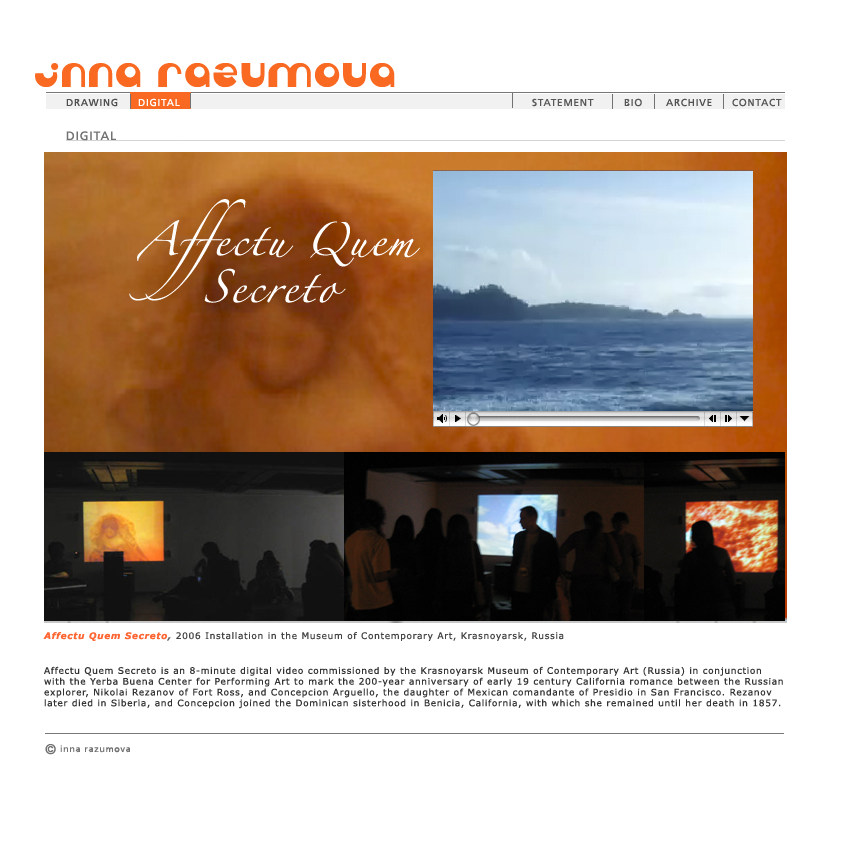
<style>
.page{position:relative;width:860px;height:864px;background:#ffffff}
.page>*{position:absolute;margin:0}
.t1{font:24px "Tabun";letter-spacing:0.075em;color:#f96922}
.t2{font:10px "Frutiger-Roman";letter-spacing:0.075em;color:#4f4f4f}
.t3{font:10px "Frutiger-Roman";letter-spacing:0.075em;color:#ffffff}
.t4{font:10px "Frutiger-Roman";letter-spacing:0.075em;color:#585858}
.t5{font:10px "Frutiger-Roman";letter-spacing:0.075em;color:#555555}
.t6{font:10px "Frutiger-Roman";letter-spacing:0.075em;color:#515151}
.t7{font:10px "Frutiger-Roman";letter-spacing:0.075em;color:#575757}
.t8{font:12px "Frutiger-Roman";letter-spacing:0.075em;color:#727272}
.t9{font:30px "Zapfino";letter-spacing:0.075em;color:#ffffff}
.t10{font:9px "Verdana";letter-spacing:0.075em;color:#444444}
.t11{font:9px "Verdana-BoldItalic";letter-spacing:0.075em;color:#ff6633}
.t12{font:9px "Verdana-BoldItalic";letter-spacing:0.075em;color:#666666}
.t13{font:9px "Verdana";letter-spacing:0.075em;color:#333333}
.t14{font:14px "Frutiger-Roman";letter-spacing:0.075em;color:#727272}
.t15{font:9px "Frutiger-Roman";letter-spacing:0.075em;color:#727272}
</style>
<div class="page">
<p class="t1" style="left:35px;top:63px;width:360px;height:25px">inna razumova</p>
<p class="t2" style="left:66px;top:98px;width:52px;height:9px">DRAWING</p>
<p class="t3" style="left:138px;top:98px;width:42px;height:9px">DIGITAL</p>
<p class="t4" style="left:532px;top:98px;width:62px;height:9px">STATEMENT</p>
<p class="t5" style="left:624px;top:98px;width:18px;height:9px">BIO</p>
<p class="t6" style="left:666px;top:98px;width:46px;height:9px">ARCHIVE</p>
<p class="t7" style="left:732px;top:98px;width:50px;height:9px">CONTACT</p>
<p class="t8" style="left:66px;top:131px;width:50px;height:10px">DIGITAL</p>
<p class="t9" style="left:129px;top:199px;width:291px;height:102px">Affectu Quem</p>
<p class="t9" style="left:204px;top:268px;width:142px;height:35px">Secreto</p>
<p class="t10" style="left:43px;top:632px;width:521px;height:9px"><span class="t11">Affectu Quem Secreto</span><span class="t12">,</span> 2006 Installation in the Museum of Contemporary Art, Krasnoyarsk, Russia</p>
<p class="t13" style="left:44px;top:666px;width:739px;height:43px">Affectu Quem Secreto is an 8-minute digital video commissioned by the Krasnoyarsk Museum of Contemporary Art (Russia) in conjunction with the Yerba Buena Center for Performing Art to mark the 200-year anniversary of early 19 century California romance between the Russian explorer, Nikolai Rezanov of Fort Ross, and Concepcion Arguello, the daughter of Mexican comandante of Presidio in San Francisco. Rezanov later died in Siberia, and Concepcion joined the Dominican sisterhood in Benicia, California, with which she remained until her death in 1857.</p>
<p class="t14" style="left:45px;top:744px;width:11px;height:11px">©</p>
<p class="t15" style="left:60px;top:745px;width:70px;height:8px">inna razumova</p>
</div>
